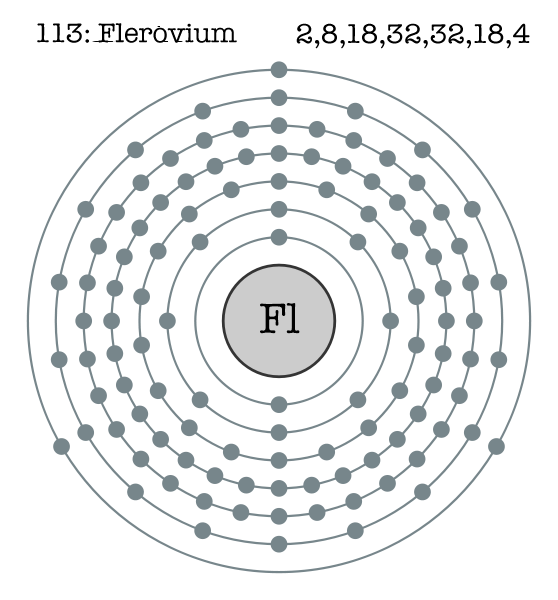
<style>
.page{position:relative;width:558px;height:600px;background:#ffffff}
.page>*{position:absolute;margin:0}
.t1{font:28px "AmericanTypewriter";color:#000000}
.t2{font:44px "AmericanTypewriter";color:#000000}
</style>
<div class="page">
<p class="t1" style="left:37px;top:23px;width:200px;height:20px">113: Flerovium</p>
<p class="t1" style="left:296px;top:23px;width:234px;height:26px">2,8,18,32,32,18,4</p>
<p class="t2" style="left:260px;top:303px;width:40px;height:31px">Fl</p>
</div>
